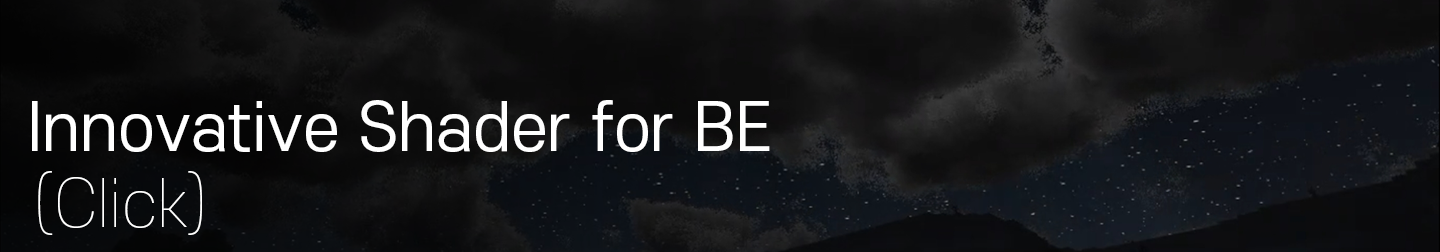
<style>
.page{position:relative;width:1440px;height:252px}
.page>*{position:absolute;margin:0}
.t1{font:64px "S-CoreDream-4Regular";color:#ffffff}
.t2{font:64px "S-CoreDream-1Thin";color:#ffffff}
</style>
<div class="page">
<p class="t1" style="left:32px;top:100px;width:738px;height:52px">Innovative Shader for BE</p>
<p class="t2" style="left:38px;top:171px;width:164px;height:64px">(Click)</p>
</div>
